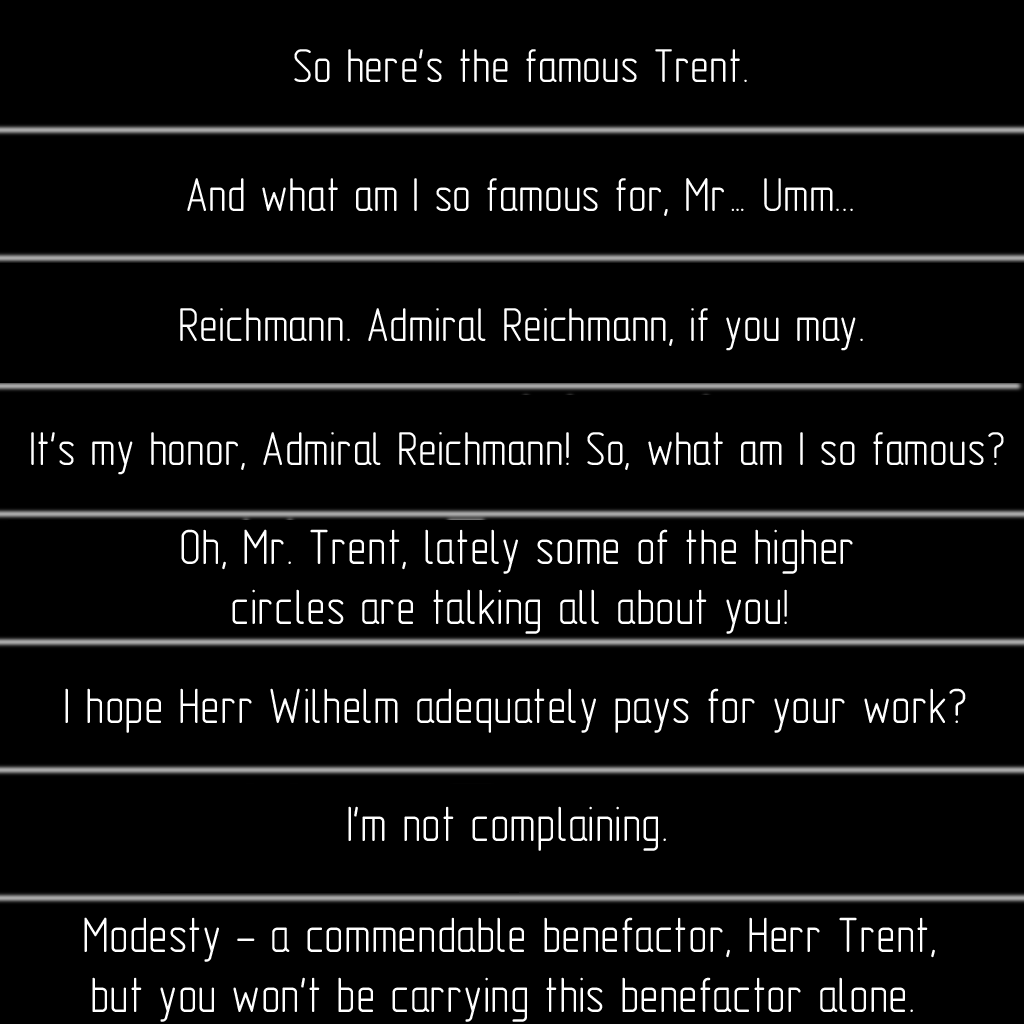
<style>
.page{position:relative;width:1024px;height:1024px;background:#000000}
.page>*{position:absolute;margin:0}
.t1{font:48px "GOST-2.304-81typeA";color:#ffffff}
.t2{font:50px "GOST-2.304-81typeA";color:#ffffff}
</style>
<div class="page">
<p class="t1" style="left:294px;top:49px;width:453px;height:33px">So here's the famous Trent.</p>
<p class="t1" style="left:187px;top:178px;width:666px;height:38px">And what am I so famous for, Mr… Umm...</p>
<p class="t1" style="left:180px;top:308px;width:683px;height:43px">Reichmann. Admiral Reichmann, if you may.</p>
<p class="t1" style="left:31px;top:432px;width:973px;height:43px">It's my honor, Admiral Reichmann! So, what am I so famous?</p>
<p class="t2" style="left:181px;top:529px;width:672px;height:105px;text-align:center">Oh, Mr. Trent, lately some of the higher<br>circles are talking all about you!</p>
<p class="t2" style="left:65px;top:688px;width:901px;height:45px">I hope Herr Wilhelm adequately pays for your work?</p>
<p class="t2" style="left:348px;top:806px;width:318px;height:45px">I'm not complaining.</p>
<p class="t2" style="left:84px;top:917px;width:851px;height:105px;text-align:center">Modesty – a commendable benefactor, Herr Trent,<br>but you won't be carrying this benefactor alone.</p>
</div>
